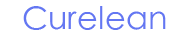
<style>
.page{position:relative;width:189px;height:36px;background:#ffffff}
.page>*{position:absolute;margin:0}
.t1{font:32.3px "STHeitiSC-Light";color:#6477f2}
</style>
<div class="page">
<p class="t1" style="left:23px;top:6px;width:143px;height:24px">Curelean</p>
</div>
